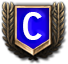
<style>
.page{position:relative;width:68px;height:64px}
.page>*{position:absolute;margin:0}
.t1{font:41.3px "HighwayGothic";color:#ffffff}
</style>
<div class="page">
<p class="t1" style="left:23px;top:12px;width:19px;height:28px">C</p>
</div>
